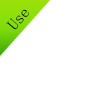
<style>
.page{position:relative;width:101px;height:94px;background:#ffffff}
.page>*{position:absolute;margin:0}
.t1{font:16px "SimSun";color:#000000}
</style>
<div class="page">
<p class="t1" style="left:6px;top:9px;width:23px;height:21px;rotate:-49deg">Use</p>
</div>
